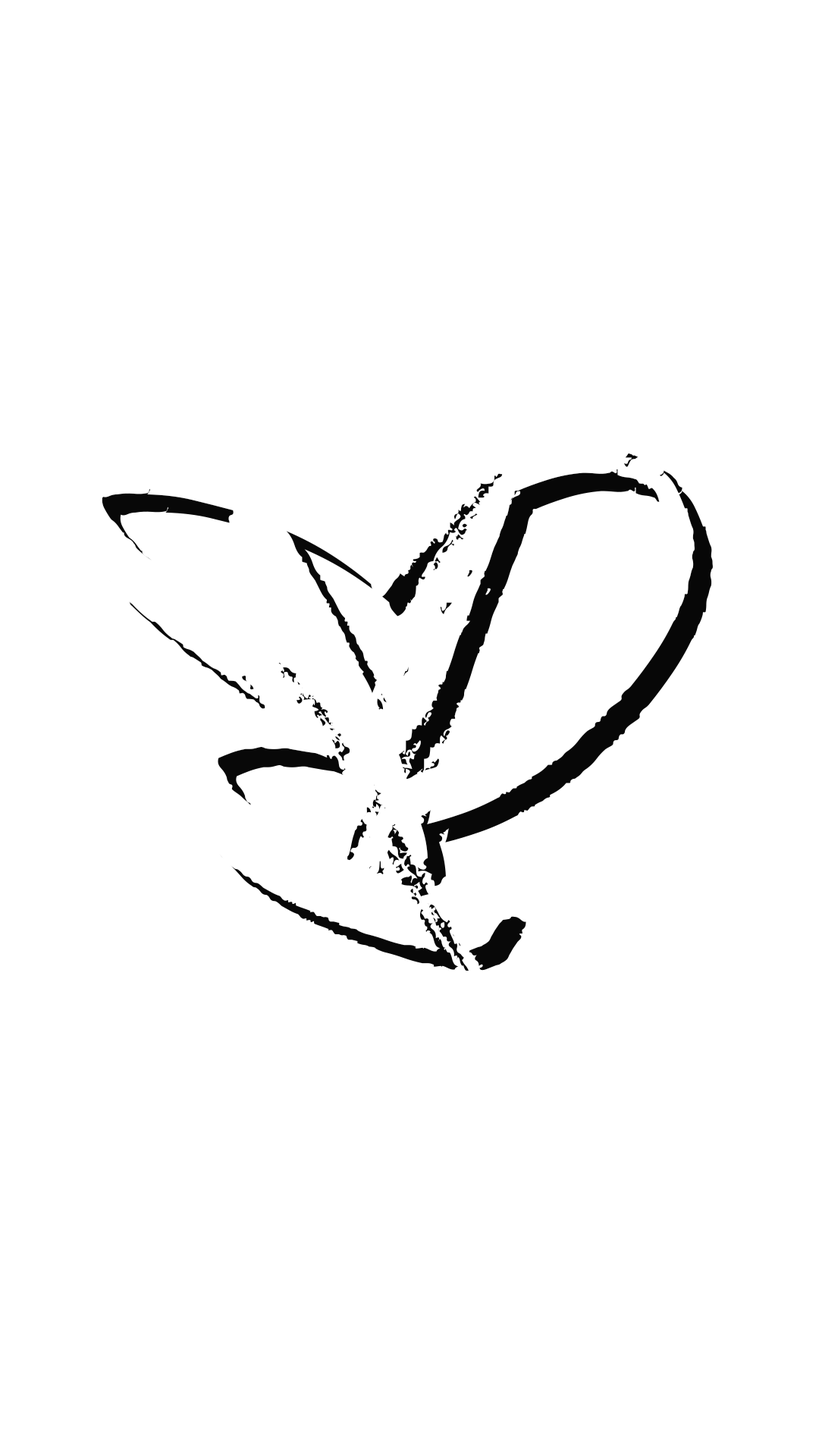
<style>
.page{position:relative;width:819px;height:1456px;background:#ffffff}
.page>*{position:absolute;margin:0}
.t1{font:689.9px "Hiatus"}
</style>
<div class="page">
<p class="t1" style="left:340px;top:450px;width:373px;height:490px">P</p>
</div>
